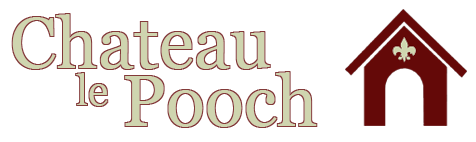
<style>
.page{position:relative;width:476px;height:142px;background:#ffffff}
.page>*{position:absolute;margin:0}
.t1{font:72px "Georgia";color:#cfd5af}
</style>
<div class="page">
<p class="t1" style="left:12px;top:14px;width:258px;height:55px">Chateau</p>
<p class="t1" style="left:125px;top:72px;width:192px;height:55px">Pooch</p>
</div>
